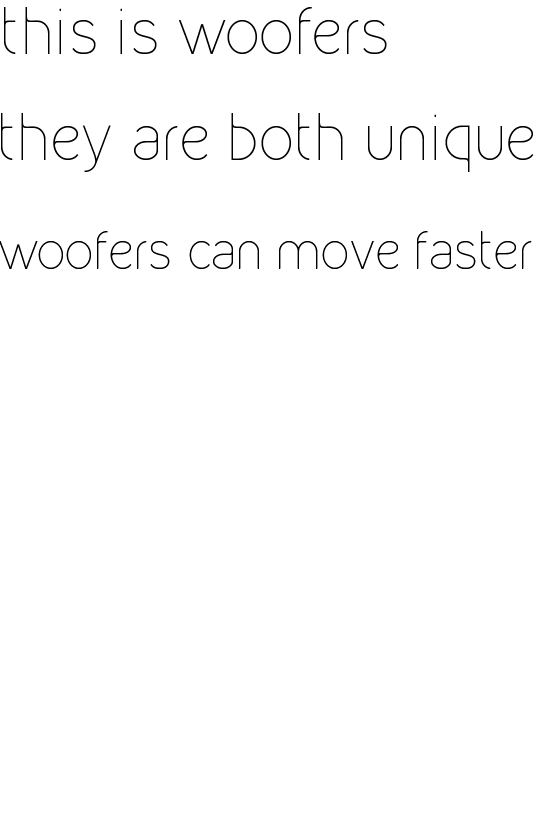
<style>
.page{position:relative;width:535px;height:816px;background:#ffffff}
.page>*{position:absolute;margin:0}
.t1{font:62.1px "Kirvy-Thin";color:#000000}
.t2{font:62px "Kirvy-Thin";color:#000000}
.t3{font:51px "Kirvy-Thin";color:#000000}
</style>
<div class="page">
<p class="t1" style="left:4px;top:7px;width:383px;height:47px">this is woofers</p>
<p class="t2" style="left:1px;top:113px;width:533px;height:59px">they are both unique</p>
<p class="t3" style="left:0px;top:231px;width:532px;height:38px">woofers can move faster</p>
</div>
